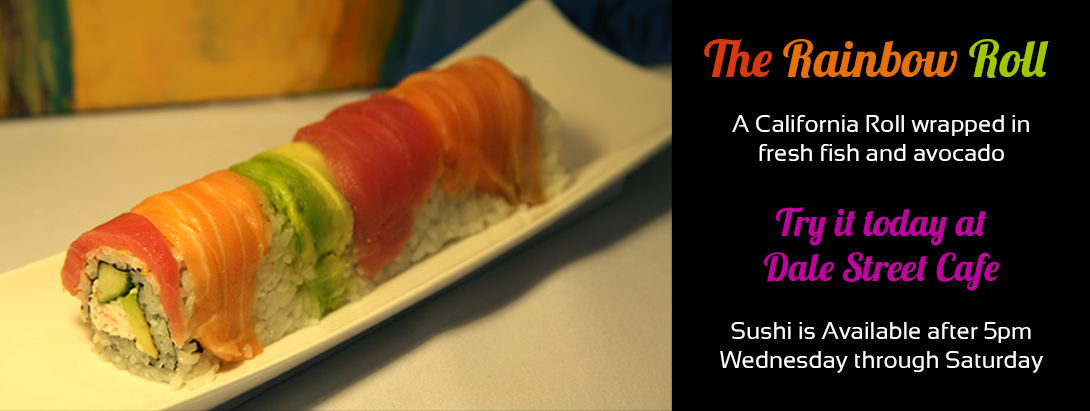
<style>
.page{position:relative;width:1090px;height:411px;background:#000000}
.page>*{position:absolute;margin:0}
.t1{font:50.8px "Lobster1.4";color:#e5710e}
.t2{font:50.8px "Lobster1.4";color:#d73912}
.t3{font:50.8px "Lobster1.4";color:#a0c606}
.t4{font:24px "Sansation";color:#ffffff}
.t5{font:38px "Lobster1.4";color:#bf049e}
</style>
<div class="page">
<p class="t1" style="left:704px;top:39px;width:345px;height:39px"><span class="t2">The</span> Rainbow <span class="t3">Roll</span></p>
<p class="t4" style="left:720px;top:115px;width:323px;height:258px;text-align:center">A California Roll wrapped in fresh fish and avocado<br><br><span class="t5">Try it today at <br>Dale Street Cafe<br></span><br>Sushi is Available after 5pm Wednesday through Saturday</p>
</div>
